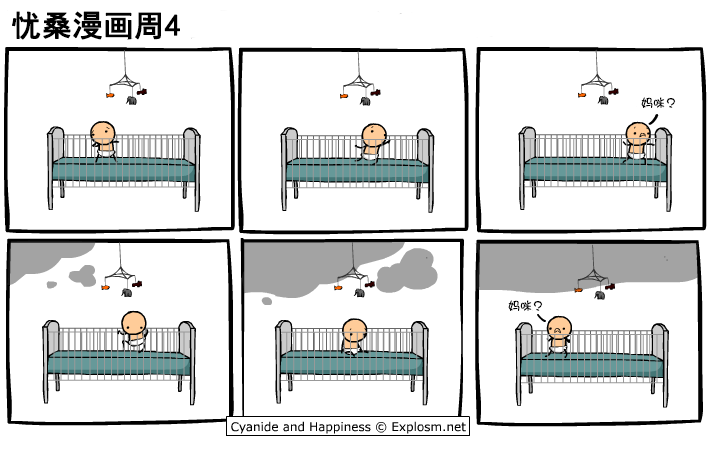
<style>
.page{position:relative;width:720px;height:450px;background:#ffffff}
.page>*{position:absolute;margin:0}
.t1{font:30px "SimHei";color:#000000;font-weight:bold}
.t2{font:12px "DFGirl";color:#000000}
</style>
<div class="page">
<p class="t1" style="left:12px;top:11px;width:168px;height:29px">忧桑漫画周4</p>
<p class="t2" style="left:641px;top:97px;width:35px;height:11px">妈咪？</p>
<p class="t2" style="left:508px;top:300px;width:35px;height:11px">妈咪？</p>
</div>
